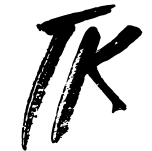
<style>
.page{position:relative;width:152px;height:151px;background:#ffffff}
.page>*{position:absolute;margin:0}
.t1{font:140px "STONEHARBOUR-Italic";color:#000000}
</style>
<div class="page">
<p class="t1" style="left:21px;top:4px;width:122px;height:147px">TK</p>
</div>
